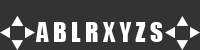
<style>
.page{position:relative;width:200px;height:50px;background:#333333}
.page>*{position:absolute;margin:0}
.t1{font:25px "Impact";color:#ffffff}
</style>
<div class="page">
<p class="t1" style="left:35px;top:22px;width:128px;height:20px">A B L R X Y Z S</p>
</div>
